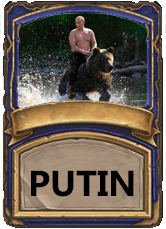
<style>
.page{position:relative;width:166px;height:229px}
.page>*{position:absolute;margin:0}
.t1{font:36px "MicrosoftTaiLe-Bold";color:#000000}
</style>
<div class="page">
<p class="t1" style="left:31px;top:170px;width:103px;height:27px">PUTIN</p>
</div>
